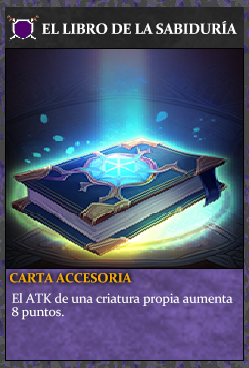
<style>
.page{position:relative;width:249px;height:368px}
.page>*{position:absolute;margin:0}
.t1{font:14.7px "Constantia-Bold";letter-spacing:-0.02em;color:#ffffff}
.t2{font:13.3px "Constantia-Bold";letter-spacing:-0.02em;color:#f2ac05}
.t3{font:13.3px/13.3px "Constantia";letter-spacing:-0.02em;color:#ffffff}
</style>
<div class="page">
<p class="t1" style="left:42px;top:21px;width:195px;height:13px">EL LIBRO DE LA SABIDURÍA</p>
<p class="t2" style="left:10px;top:273px;width:122px;height:10px">CARTA ACCESORIA</p>
<p class="t3" style="left:12px;top:293px;width:221px;height:27px">El ATK de una criatura propia aumenta<br>8 puntos.</p>
</div>
